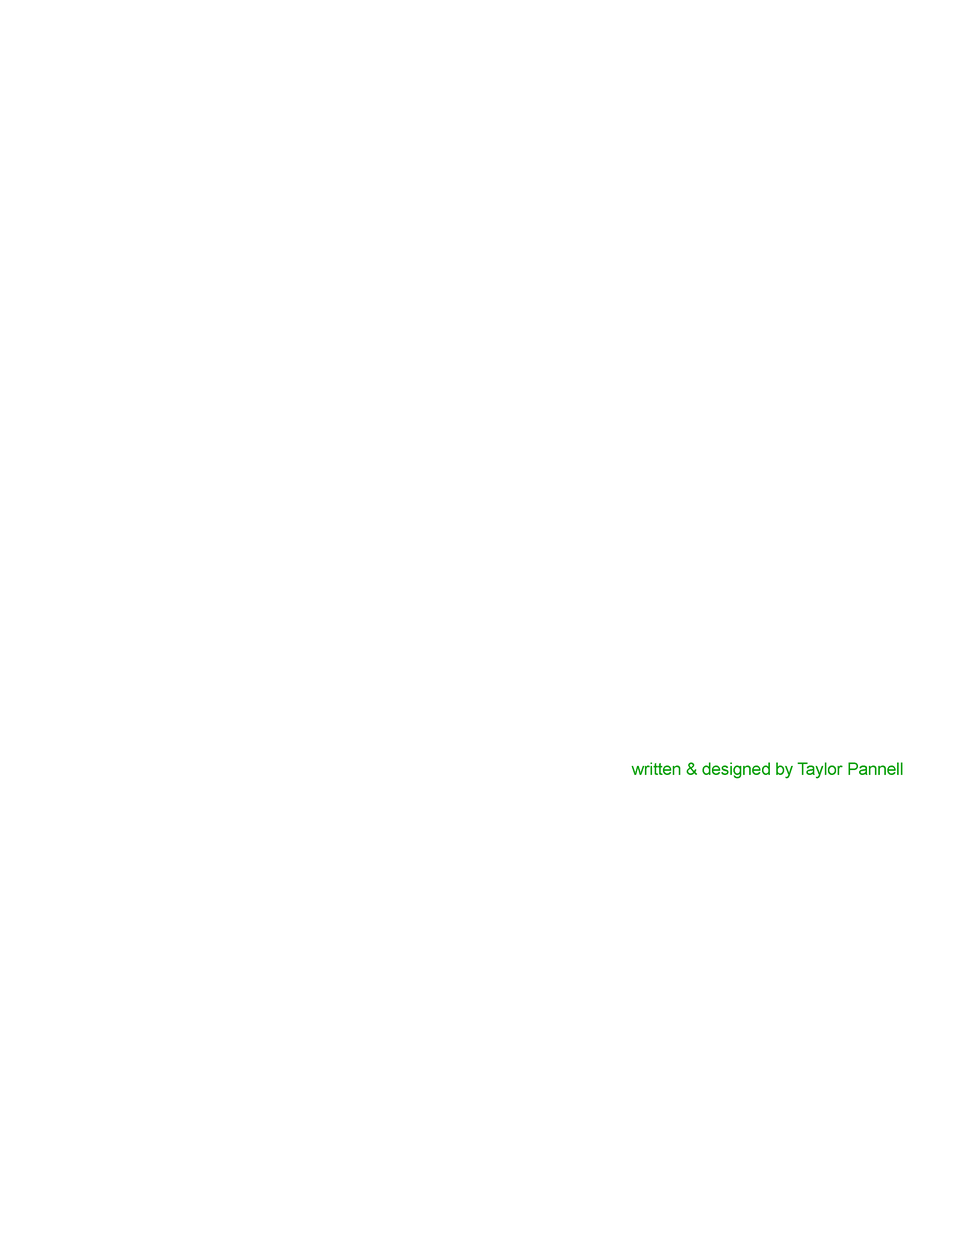
<style>
.page{position:relative;width:960px;height:1242px;background:#ffffff}
.page>*{position:absolute;margin:0}
.t1{font:17.3px "ArialMT";letter-spacing:-0.01em;color:#009e00}
</style>
<div class="page">
<p class="t1" style="left:632px;top:763px;width:270px;height:15px">written &amp; designed by Taylor Pannell</p>
</div>
